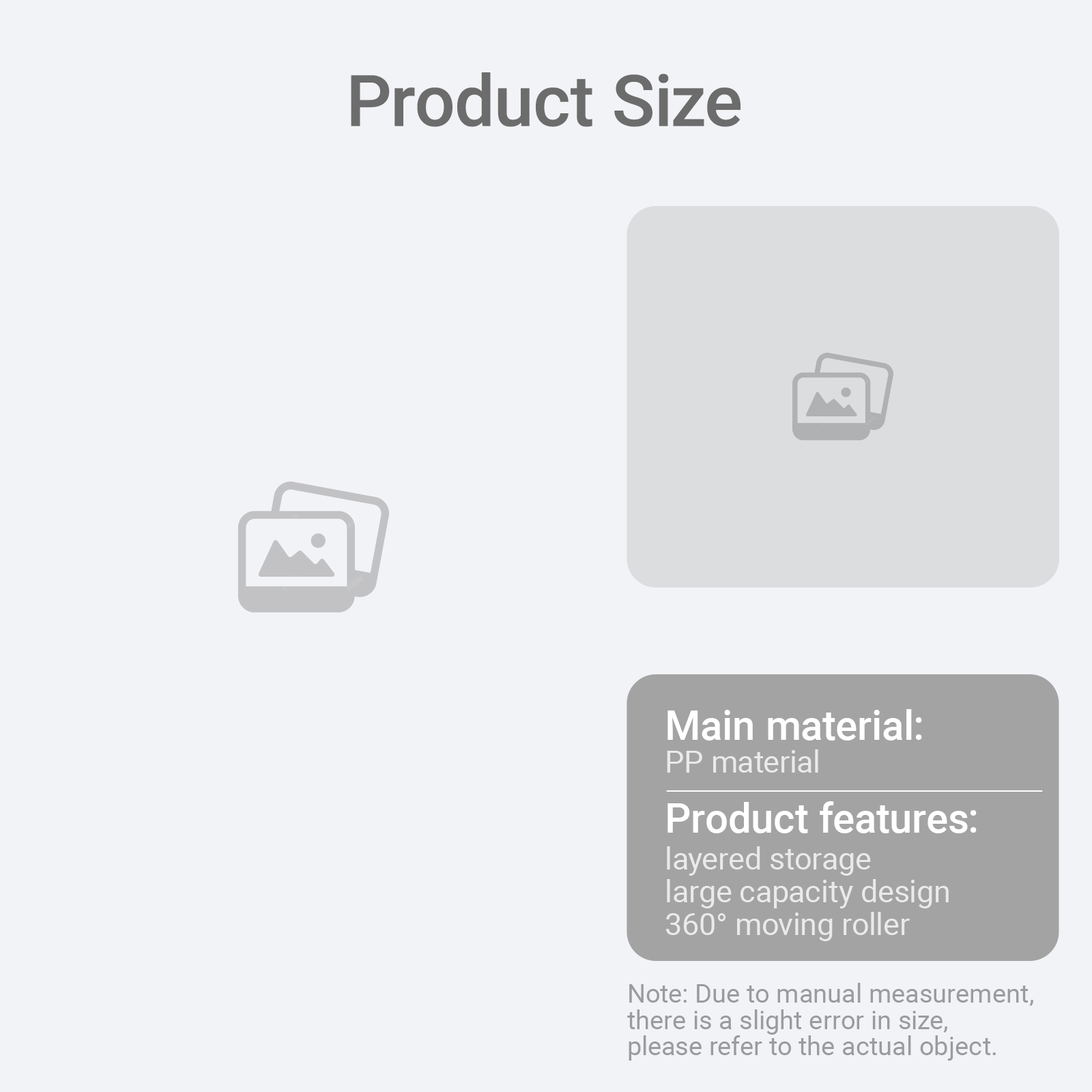
<style>
.page{position:relative;width:1092px;height:1092px;background:#f2f3f6}
.page>*{position:absolute;margin:0}
.t1{font:71.3px "Roboto-Medium";color:#6c6c6c}
.t2{font:40.9px "Roboto-Medium";color:#ffffff}
.t3{font:30.6px "Roboto-Regular";color:#ffffff}
.t4{font:30.6px/32.8px "Roboto-Regular";color:#ffffff}
.t5{font:26.2px/26.2px "Roboto-Regular";color:#9a9b9d}
</style>
<div class="page">
<p class="t1" style="left:351px;top:72px;width:390px;height:55px">Product Size</p>
<p class="t2" style="left:667px;top:709px;width:255px;height:32px">Main material:</p>
<p class="t3" style="left:667px;top:749px;width:151px;height:24px;opacity:0.75">PP material</p>
<p class="t2" style="left:667px;top:801px;width:310px;height:32px">Product features:</p>
<p class="t4" style="left:666px;top:846px;width:283px;height:95px;opacity:0.75">layered storage<br>large capacity design<br>360° moving roller</p>
<p class="t5" style="left:627px;top:983px;width:406px;height:78px">Note: Due to manual measurement, <br>there is a slight error in size, <br>please refer to the actual object.</p>
</div>
